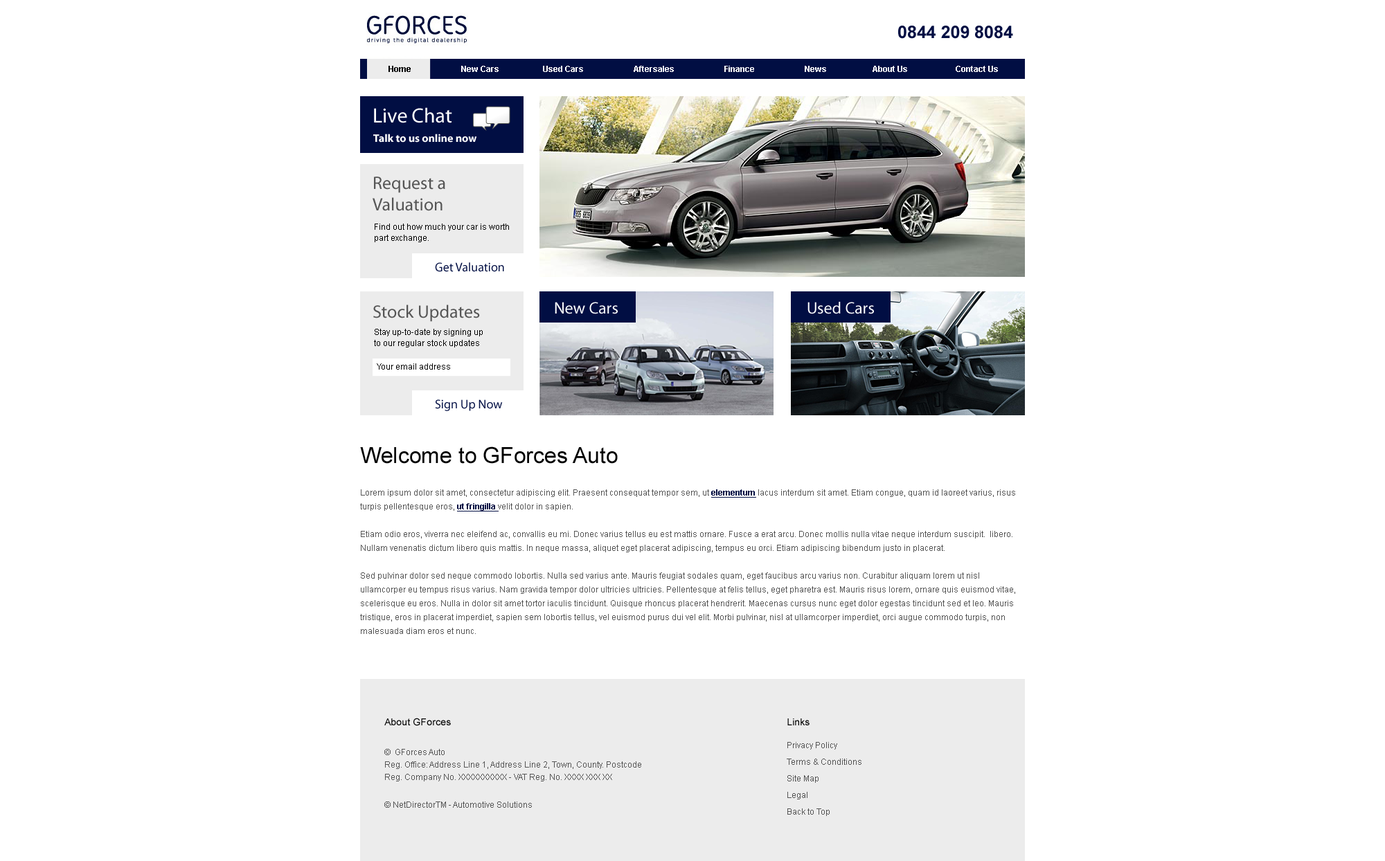
<style>
.page{position:relative;width:1385px;height:861px;background:#ffffff}
.page>*{position:absolute;margin:0}
.t1{font:17.3px "Arial-BoldMT";color:#010e43}
.t2{font:8.3px "Arial-BoldMT";color:#ffffff}
.t3{font:8.3px "Arial-BoldMT";color:#000000}
.t4{font:20.8px "MyriadPro-Regular";color:#ffffff}
.t5{font:11.1px "MyriadPro-Bold";color:#ffffff}
.t6{font:18px "MyriadPro-Regular";color:#555555}
.t7{font:8.3px/11.1px "ArialMT";color:#000000}
.t8{font:12.5px "MyriadPro-Regular";color:#010e43}
.t9{font:16.6px "MyriadPro-Regular";color:#ffffff}
.t10{font:8.3px "ArialMT";color:#000000}
.t11{font:22.2px "ArialMT";color:#000000}
.t12{font:8.3px/13.8px "ArialMT";color:#555555}
.t13{font:8.3px/13.8px "Arial-BoldMT";color:#010e43;text-decoration:underline}
.t14{font:9.7px "ArialMT";color:#000000}
.t15{font:8.3px/12.5px "ArialMT";color:#555555}
.t16{font:8.3px/16.6px "ArialMT";color:#555555}
.t17{font:8.3px "ArialMT";color:#555555}
</style>
<div class="page">
<p class="t1" style="left:898px;top:26px;width:115px;height:13px">0844 209 8084</p>
<p class="t2" style="left:388px;top:66px;width:610px;height:6px"><span class="t3">Home       </span>                 New Cars                     Used Cars                        Aftersales                        Finance                        News                      About Us                       Contact Us</p>
<p class="t4" style="left:374px;top:107px;width:78px;height:16px">Live Chat</p>
<p class="t5" style="left:373px;top:134px;width:104px;height:9px">Talk to us online now</p>
<p class="t6" style="left:372px;top:177px;width:73px;height:34px">Request a<br>Valuation</p>
<p class="t7" style="left:375px;top:224px;width:134px;height:18px">Find out how much your car is worth part exchange.</p>
<p class="t8" style="left:435px;top:262px;width:69px;height:10px">Get Valuation</p>
<p class="t6" style="left:373px;top:305px;width:107px;height:17px">Stock Updates</p>
<p class="t9" style="left:555px;top:302px;width:63px;height:12px">New Cars</p>
<p class="t9" style="left:807px;top:302px;width:67px;height:12px">Used Cars</p>
<p class="t7" style="left:374px;top:329px;width:109px;height:19px">Stay up-to-date by signing up<br>to our regular stock updates</p>
<p class="t10" style="left:377px;top:363px;width:73px;height:7px">Your email address</p>
<p class="t8" style="left:435px;top:399px;width:68px;height:12px">Sign Up Now</p>
<p class="t11" style="left:360px;top:447px;width:258px;height:17px">Welcome to GForces Auto</p>
<p class="t12" style="left:360px;top:489px;width:655px;height:145px">Lorem ipsum dolor sit amet, consectetur adipiscing elit. Praesent consequat tempor sem, ut <span class="t13">elementum</span> lacus interdum sit amet. Etiam congue, quam id laoreet varius, risus turpis pellentesque eros, <span class="t13">ut fringilla </span>velit dolor in sapien. <br><br>Etiam odio eros, viverra nec eleifend ac, convallis eu mi. Donec varius tellus eu est mattis ornare. Fusce a erat arcu. Donec mollis nulla vitae neque interdum suscipit.  libero. Nullam venenatis dictum libero quis mattis. In neque massa, aliquet eget placerat adipiscing, tempus eu orci. Etiam adipiscing bibendum justo in placerat.<br><br>Sed pulvinar dolor sed neque commodo lobortis. Nulla sed varius ante. Mauris feugiat sodales quam, eget faucibus arcu varius non. Curabitur aliquam lorem ut nisl ullamcorper eu tempus risus varius. Nam gravida tempor dolor ultricies ultricies. Pellentesque at felis tellus, eget pharetra est. Mauris risus lorem, ornare quis euismod vitae, scelerisque eu eros. Nulla in dolor sit amet tortor iaculis tincidunt. Quisque rhoncus placerat hendrerit. Maecenas cursus nunc eget dolor egestas tincidunt sed et leo. Mauris tristique, eros in placerat imperdiet, sapien sem lobortis tellus, vel euismod purus dui vel elit. Morbi pulvinar, nisl at ullamcorper imperdiet, orci augue commodo turpis, non malesuada diam eros et nunc.</p>
<p class="t14" style="left:384px;top:718px;width:67px;height:8px">About GForces</p>
<p class="t14" style="left:787px;top:719px;width:22px;height:7px">Links</p>
<p class="t15" style="left:384px;top:749px;width:257px;height:33px;text-align:justify">©  GForces Auto<br>Reg. Office: Address Line 1, Address Line 2, Town, County. Postcode<br>Reg. Company No. XXXXXXXXXX - VAT Reg. No. XXXX XXX XX</p>
<p class="t16" style="left:786px;top:742px;width:75px;height:74px">Privacy Policy<br>Terms &amp; Conditions<br>Site Map<br>Legal<br>Back to Top</p>
<p class="t17" style="left:384px;top:802px;width:148px;height:6px">© NetDirectorTM - Automotive Solutions</p>
</div>
